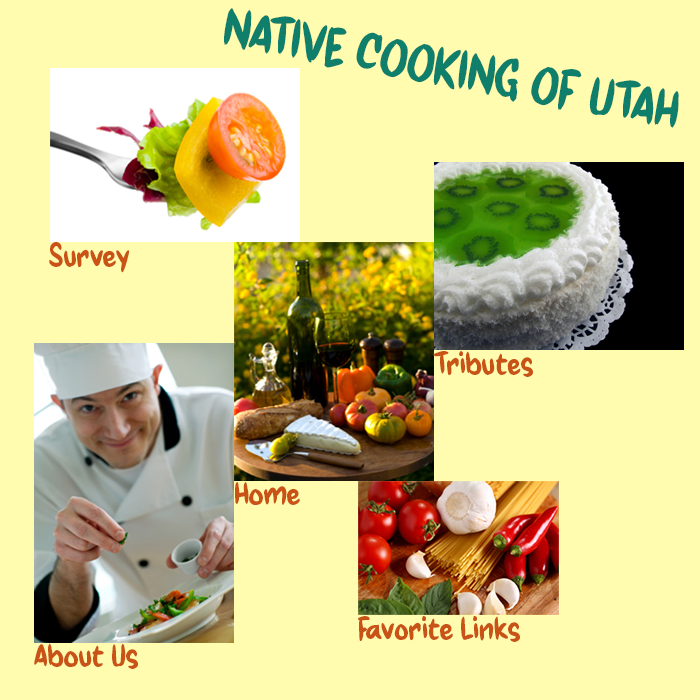
<style>
.page{position:relative;width:700px;height:700px;background:#fffbaf}
.page>*{position:absolute;margin:0}
.t1{font:50.5px "hHerba";color:#0f7f6c}
.t2{font:30px "hHerba";color:#c95317}
</style>
<div class="page">
<p class="t1" style="left:224px;top:8px;width:455px;height:120px;rotate:11deg">NATIVE COOKING OF UTAH</p>
<p class="t2" style="left:49px;top:242px;width:80px;height:31px">Survey</p>
<p class="t2" style="left:433px;top:351px;width:100px;height:26px">Tributes</p>
<p class="t2" style="left:235px;top:482px;width:65px;height:23px">Home</p>
<p class="t2" style="left:358px;top:616px;width:162px;height:26px">Favorite Links</p>
<p class="t2" style="left:34px;top:643px;width:104px;height:26px">About Us</p>
</div>
